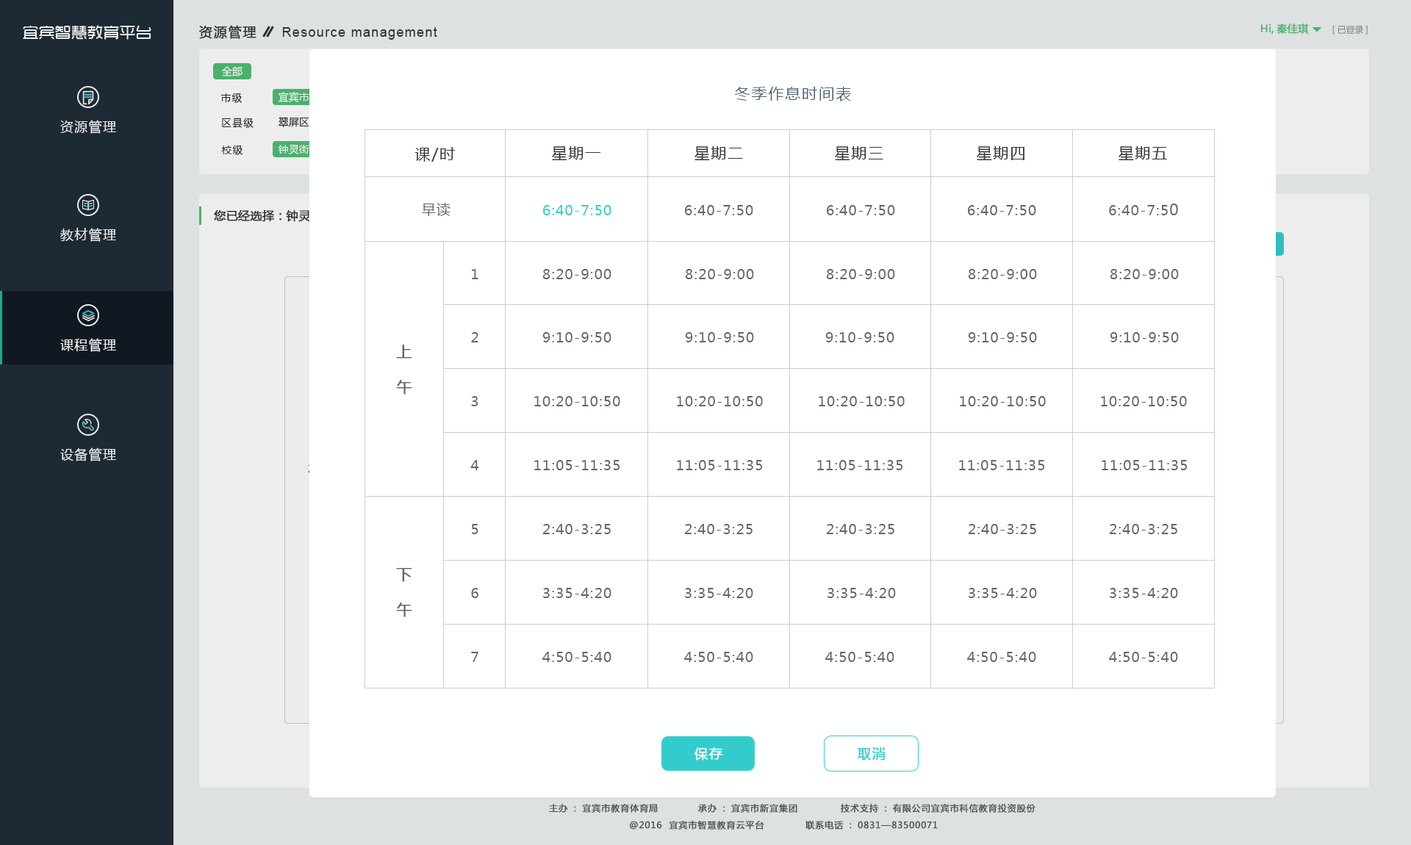
<style>
.page{position:relative;width:1411px;height:845px;background:#feffff}
.page>*{position:absolute;margin:0}
.t1{font:16.2px "TRENDS";color:#ffffff}
.t2{font:13.2px "MicrosoftYaHei";letter-spacing:0.075em;color:#333333;font-weight:bold}
.t3{font:13.2px "ArialMT";letter-spacing:0.075em;color:#333333}
.t4{font:10.3px "MicrosoftYaHei";color:#4dbd73;font-weight:bold}
.t5{font:8.8px "MicrosoftYaHei";letter-spacing:-0.01em;color:#868686}
.t6{font:10.3px "MicrosoftYaHei";color:#ededed}
.t7{font:15.7px "MicrosoftYaHei";letter-spacing:0.075em;color:#4e6471}
.t8{font:10.3px "MicrosoftYaHei";letter-spacing:0.075em;color:#222222}
.t9{font:10.3px "MicrosoftYaHei";color:#ffffff}
.t10{font:13.2px "MicrosoftYaHei";letter-spacing:0.075em;color:#ffffff}
.t11{font:10.3px "MicrosoftYaHei"}
.t12{font:15.7px "MicrosoftYaHei";letter-spacing:0.075em;color:#333333}
.t13{font:11.8px "MicrosoftYaHei";color:#333333;font-weight:bold}
.t14{font:13.7px "MicrosoftYaHei";letter-spacing:0.075em;color:#666666}
.t15{font:13.7px "MicrosoftYaHei";letter-spacing:0.075em;color:#33cccc}
.t16{font:15.7px "MicrosoftYaHei";letter-spacing:0.075em;color:#666666}
.t17{font:15.7px/35.3px "MicrosoftYaHei";letter-spacing:0.075em;color:#666666;font-weight:bold}
.t18{font:13.2px "MicrosoftYaHei";letter-spacing:0.075em;color:#ffffff;font-weight:bold}
.t19{font:13.2px "MicrosoftYaHei";letter-spacing:0.075em;color:#33cccc;font-weight:bold}
.t20{font:8.8px "MicrosoftYaHei";letter-spacing:0.05em;color:#545454;font-weight:bold}
</style>
<div class="page">
<p class="t1" style="left:23px;top:25px;width:128px;height:15px">宜宾智慧教育平台</p>
<p class="t2" style="left:199px;top:25px;width:57px;height:14px">资源管理</p>
<p class="t3" style="left:282px;top:27px;width:155px;height:13px">Resource management</p>
<p class="t4" style="left:1261px;top:24px;width:48px;height:10px">Hi,秦佳琪</p>
<p class="t5" style="left:1332px;top:25px;width:36px;height:10px">[已登录]</p>
<p class="t6" style="left:222px;top:66px;width:21px;height:10px">全部</p>
<p class="t7" style="left:735px;top:87px;width:116px;height:14px">冬季作息时间表</p>
<p class="t8" style="left:220px;top:93px;width:23px;height:10px">市级</p>
<p class="t9" style="left:278px;top:92px;width:62px;height:11px">宜宾市资源库</p>
<p class="t10" style="left:60px;top:120px;width:56px;height:14px">资源管理</p>
<p class="t8" style="left:222px;top:118px;width:32px;height:10px">区县级</p>
<p class="t11" style="left:279px;top:117px;width:61px;height:11px">翠屏区资源库</p>
<p class="t8" style="left:221px;top:145px;width:22px;height:10px">校级</p>
<p class="t9" style="left:278px;top:144px;width:52px;height:10px">钟灵街小学</p>
<p class="t12" style="left:414px;top:147px;width:41px;height:15px">课/时</p>
<p class="t12" style="left:552px;top:146px;width:49px;height:15px">星期一</p>
<p class="t12" style="left:694px;top:146px;width:49px;height:15px">星期二</p>
<p class="t12" style="left:835px;top:146px;width:48px;height:15px">星期三</p>
<p class="t12" style="left:977px;top:146px;width:47px;height:15px">星期四</p>
<p class="t12" style="left:1118px;top:146px;width:49px;height:15px">星期五</p>
<p class="t13" style="left:214px;top:209px;width:133px;height:13px">您已经选择：钟灵街小学</p>
<p class="t14" style="left:422px;top:203px;width:28px;height:13px">早读</p>
<p class="t15" style="left:543px;top:205px;width:68px;height:10px">6:40-7:50</p>
<p class="t14" style="left:685px;top:205px;width:68px;height:10px">6:40-7:50</p>
<p class="t14" style="left:827px;top:205px;width:68px;height:10px">6:40-7:50</p>
<p class="t14" style="left:968px;top:205px;width:68px;height:10px">6:40-7:50</p>
<p class="t14" style="left:1109px;top:204px;width:69px;height:11px">6:40-7:5<span class="t16">0</span></p>
<p class="t10" style="left:60px;top:228px;width:56px;height:14px">教材管理</p>
<p class="t14" style="left:472px;top:269px;width:6px;height:10px">1</p>
<p class="t14" style="left:542px;top:269px;width:69px;height:10px">8:20-9:00</p>
<p class="t14" style="left:685px;top:269px;width:69px;height:10px">8:20-9:00</p>
<p class="t14" style="left:826px;top:269px;width:69px;height:10px">8:20-9:00</p>
<p class="t14" style="left:968px;top:269px;width:69px;height:10px">8:20-9:00</p>
<p class="t14" style="left:1110px;top:269px;width:69px;height:10px">8:20-9:00</p>
<p class="t10" style="left:60px;top:338px;width:56px;height:14px">课程管理</p>
<p class="t14" style="left:471px;top:332px;width:7px;height:10px">2</p>
<p class="t14" style="left:542px;top:332px;width:69px;height:10px">9:10-9:50</p>
<p class="t14" style="left:685px;top:332px;width:69px;height:10px">9:10-9:50</p>
<p class="t14" style="left:825px;top:332px;width:69px;height:10px">9:10-9:50</p>
<p class="t14" style="left:968px;top:332px;width:69px;height:10px">9:10-9:50</p>
<p class="t14" style="left:1110px;top:332px;width:69px;height:10px">9:10-9:50</p>
<p class="t17" style="left:396px;top:345px;width:16px;height:50px;text-align:center">上<br>午</p>
<p class="t14" style="left:471px;top:396px;width:7px;height:10px">3</p>
<p class="t14" style="left:534px;top:396px;width:86px;height:10px">10:20-10:50</p>
<p class="t14" style="left:677px;top:396px;width:86px;height:10px">10:20-10:50</p>
<p class="t14" style="left:819px;top:396px;width:86px;height:10px">10:20-10:50</p>
<p class="t14" style="left:960px;top:396px;width:86px;height:10px">10:20-10:50</p>
<p class="t14" style="left:1101px;top:396px;width:86px;height:10px">10:20-10:50</p>
<p class="t10" style="left:60px;top:448px;width:56px;height:14px">设备管理</p>
<p class="t14" style="left:470px;top:460px;width:9px;height:10px">4</p>
<p class="t14" style="left:534px;top:460px;width:86px;height:10px">11:05-11:35</p>
<p class="t14" style="left:677px;top:460px;width:86px;height:10px">11:05-11:35</p>
<p class="t14" style="left:817px;top:460px;width:86px;height:10px">11:05-11:35</p>
<p class="t14" style="left:959px;top:460px;width:86px;height:10px">11:05-11:35</p>
<p class="t14" style="left:1102px;top:460px;width:86px;height:10px">11:05-11:35</p>
<p class="t14" style="left:472px;top:524px;width:6px;height:10px">5</p>
<p class="t14" style="left:542px;top:524px;width:69px;height:10px">2:40-3:25</p>
<p class="t14" style="left:684px;top:524px;width:69px;height:10px">2:40-3:25</p>
<p class="t14" style="left:826px;top:524px;width:68px;height:10px">2:40-3:25</p>
<p class="t14" style="left:968px;top:524px;width:68px;height:10px">2:40-3:25</p>
<p class="t14" style="left:1109px;top:524px;width:68px;height:10px">2:40-3:25</p>
<p class="t17" style="left:396px;top:568px;width:16px;height:49px;text-align:center">下<br>午</p>
<p class="t14" style="left:471px;top:588px;width:7px;height:10px">6</p>
<p class="t14" style="left:543px;top:588px;width:68px;height:10px">3:35-4:20</p>
<p class="t14" style="left:685px;top:588px;width:68px;height:10px">3:35-4:20</p>
<p class="t14" style="left:827px;top:588px;width:69px;height:10px">3:35-4:20</p>
<p class="t14" style="left:969px;top:588px;width:68px;height:10px">3:35-4:20</p>
<p class="t14" style="left:1110px;top:588px;width:68px;height:10px">3:35-4:20</p>
<p class="t14" style="left:471px;top:652px;width:7px;height:10px">7</p>
<p class="t14" style="left:542px;top:652px;width:69px;height:10px">4:50-5:40</p>
<p class="t14" style="left:684px;top:652px;width:69px;height:10px">4:50-5:40</p>
<p class="t14" style="left:825px;top:652px;width:69px;height:10px">4:50-5:40</p>
<p class="t14" style="left:967px;top:652px;width:69px;height:10px">4:50-5:40</p>
<p class="t14" style="left:1109px;top:652px;width:69px;height:10px">4:50-5:40</p>
<p class="t18" style="left:694px;top:747px;width:28px;height:14px">保存</p>
<p class="t19" style="left:858px;top:747px;width:28px;height:14px">取消</p>
<p class="t20" style="left:549px;top:804px;width:109px;height:9px">主办：宜宾市教育体育局</p>
<p class="t20" style="left:698px;top:804px;width:99px;height:9px">承办：宜宾市新宜集团</p>
<p class="t20" style="left:841px;top:804px;width:194px;height:9px">技术支持：有限公司宜宾市科信教育投资股份</p>
<p class="t20" style="left:630px;top:821px;width:134px;height:9px">@2016  宜宾市智慧教育云平台</p>
<p class="t20" style="left:805px;top:821px;width:133px;height:9px">联系电话：0831—83500071</p>
</div>
